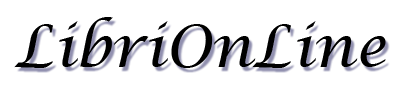
<style>
.page{position:relative;width:400px;height:85px;background:#ffffff}
.page>*{position:absolute;margin:0}
.t1{font:58.2px "LucidaCalligraphy-Italic";color:#000000}
</style>
<div class="page">
<p class="t1" style="left:14px;top:17px;width:372px;height:51px">LibriOnLine</p>
</div>
